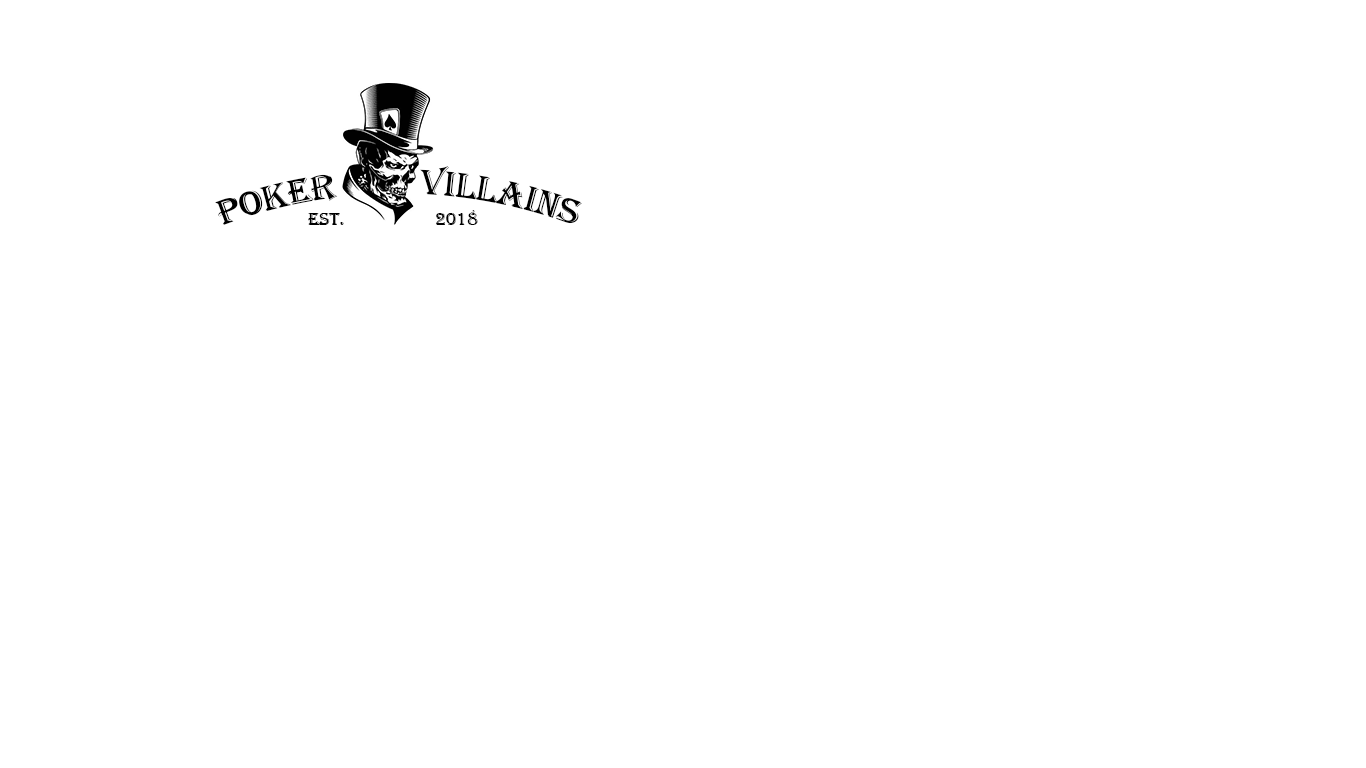
<style>
.page{position:relative;width:1366px;height:768px;background:#ffffff}
.page>*{position:absolute;margin:0}
.t1{font:36px "Algerian";color:#000000}
.t2{font:18px "Algerian";color:#000000}
</style>
<div class="page">
<p class="t1" style="left:215px;top:166px;width:367px;height:59px">Poker         Villains</p>
<p class="t2" style="left:308px;top:213px;width:36px;height:12px">Est.</p>
<p class="t2" style="left:436px;top:210px;width:42px;height:15px">2018</p>
</div>
